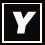
<style>
.page{position:relative;width:45px;height:45px;background:#0a0a0a}
.page>*{position:absolute;margin:0}
.t1{font:30px "Helvetica-BlackOblique";color:#fcfbfa}
</style>
<div class="page">
<p class="t1" style="left:12px;top:11px;width:25px;height:23px">Y</p>
</div>
